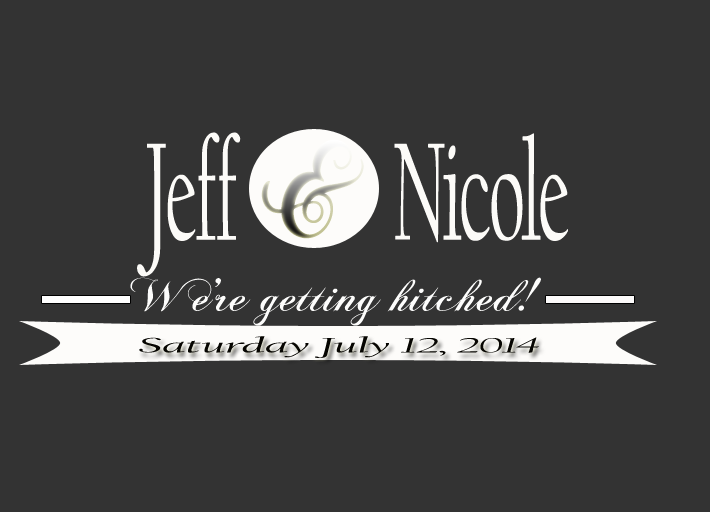
<style>
.page{position:relative;width:710px;height:512px;background:#333333}
.page>*{position:absolute;margin:0}
.t1{font:144px "CalifornianFB-Reg";color:#fcfbf8;scale:0.5 1}
.t2{font:144px "ChopinScript";scale:0.75 1}
.t3{font:48px "ChopinScript";color:#fdfdfc;scale:1.12 1}
.t4{font:18px "ChopinScript";color:#fdfdfc;scale:3 1}
.t5{font:22px "CalifornianFB-Italic";color:#060501;scale:2.5 1}
</style>
<div class="page">
<p class="t1" style="left:137px;top:132px;width:431px;height:145px">Jeff          Nicole</p>
<p class="t2" style="left:261px;top:139px;width:103px;height:100px;rotate:14deg">&amp;</p>
<p class="t3" style="left:130px;top:277px;width:411px;height:49px"><span class="t4"> </span>We’re getting hitched!</p>
<p class="t5" style="left:139px;top:336px;width:400px;height:22px">Saturday July 12, 2014</p>
</div>
